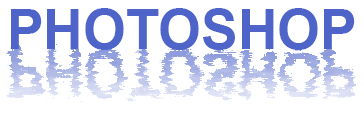
<style>
.page{position:relative;width:364px;height:113px;background:#ffffff}
.page>*{position:absolute;margin:0}
.t1{font:54.9px "Arial-BoldMT";color:#4e64c8}
</style>
<div class="page">
<p class="t1" style="left:11px;top:8px;width:344px;height:42px">PHOTOSHOP</p>
</div>
